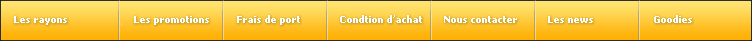
<style>
.page{position:relative;width:752px;height:41px}
.page>*{position:absolute;margin:0}
.t1{font:10px "Tahoma-Bold";color:#ffffff}
</style>
<div class="page">
<p class="t1" style="left:14px;top:15px;width:678px;height:10px">Les rayons                      Les promotions         Frais de port             Condtion d’achat       Nous contacter          Les news                    Goodies</p>
</div>
